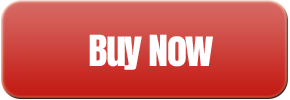
<style>
.page{position:relative;width:290px;height:100px}
.page>*{position:absolute;margin:0}
.t1{font:40.2px "Anton";letter-spacing:-0.04em;color:#ffffff}
</style>
<div class="page">
<p class="t1" style="left:89px;top:34px;width:124px;height:36px">Buy Now</p>
</div>
